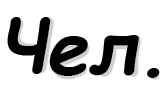
<style>
.page{position:relative;width:164px;height:90px;background:#ffffff}
.page>*{position:absolute;margin:0}
.t1{font:75px "ComicSansMS-BoldItalic";color:#000000}
</style>
<div class="page">
<p class="t1" style="left:7px;top:17px;width:153px;height:61px">Чел.</p>
</div>
